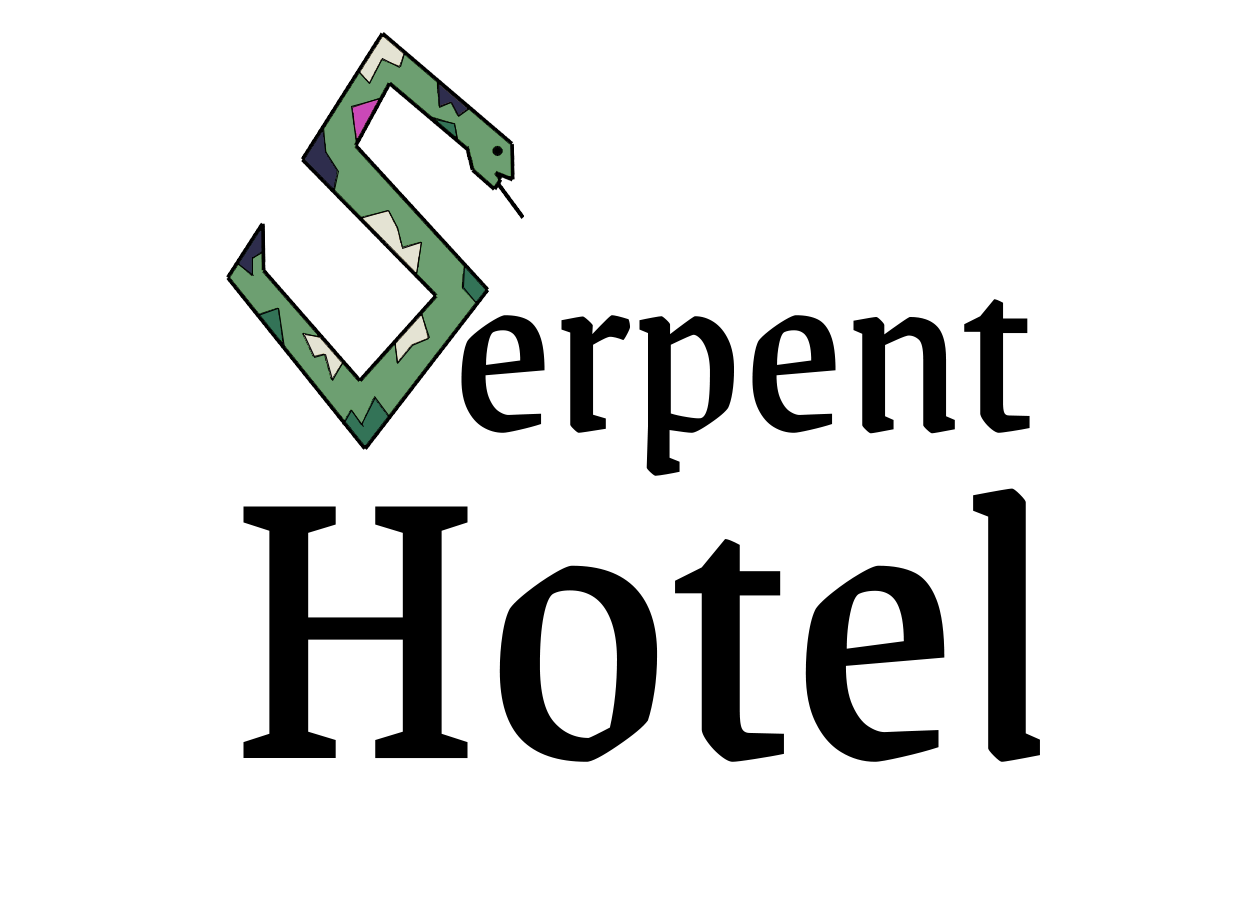
<style>
.page{position:relative;width:1254px;height:900px;background:#ffffff}
.page>*{position:absolute;margin:0}
.t1{font:250px "Grenze-Regular";color:#000000}
.t2{font:416.7px "Grenze-Regular";color:#000000}
</style>
<div class="page">
<p class="t1" style="left:461px;top:299px;width:569px;height:177px">erpent</p>
<p class="t2" style="left:243px;top:488px;width:797px;height:274px">Hotel</p>
</div>
